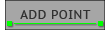
<style>
.page{position:relative;width:105px;height:30px;background:#a6a6a6}
.page>*{position:absolute;margin:0}
.t1{font:12px "PTSans-Caption";letter-spacing:0.05em;color:#313131}
</style>
<div class="page">
<p class="t1" style="left:20px;top:10px;width:71px;height:9px">ADD POINT</p>
</div>
